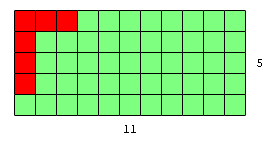
<style>
.page{position:relative;width:271px;height:142px;background:#7fff7f}
.page>*{position:absolute;margin:0}
.t1{font:12px "CourierNewPSMT";color:#000000}
</style>
<div class="page">
<p class="t1" style="left:257px;top:59px;width:5px;height:8px">5</p>
<p class="t1" style="left:124px;top:125px;width:12px;height:8px">11</p>
</div>
